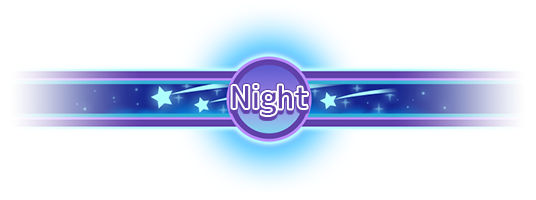
<style>
.page{position:relative;width:536px;height:200px;background:#ffffff}
.page>*{position:absolute;margin:0}
.t1{font:30px "JK-Gothic-M";color:#6141aa}
</style>
<div class="page">
<p class="t1" style="left:232px;top:85px;width:76px;height:30px">Night</p>
</div>
